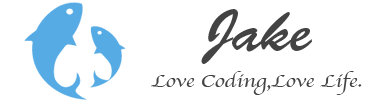
<style>
.page{position:relative;width:370px;height:100px;background:#ffffff}
.page>*{position:absolute;margin:0}
.t1{font:57.9px "BrushScriptStd";color:#434343}
.t2{font:19px "Apple-Chancery";color:#434343;scale:1.2 1}
</style>
<div class="page">
<p class="t1" style="left:201px;top:9px;width:111px;height:55px">Jake</p>
<p class="t2" style="left:151px;top:71px;width:211px;height:24px">Love Coding,Love Life.</p>
</div>
